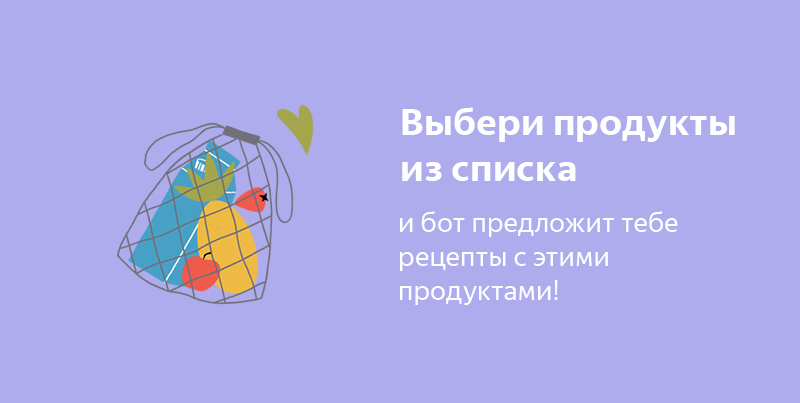
<style>
.page{position:relative;width:800px;height:403px;background:#aeacec}
.page>*{position:absolute;margin:0}
.t1{font:38.2px "YandexSansDisplay-Bold";color:#ffffff}
.t2{font:28.2px "YandexSansDisplay-Regular";color:#ffffff}
</style>
<div class="page">
<p class="t1" style="left:402px;top:107px;width:333px;height:74px">Выбери продукты<br>из списка</p>
<p class="t2" style="left:400px;top:211px;width:278px;height:94px">и бот предложит тебе <br>рецепты с этими <br>продуктами!</p>
</div>
